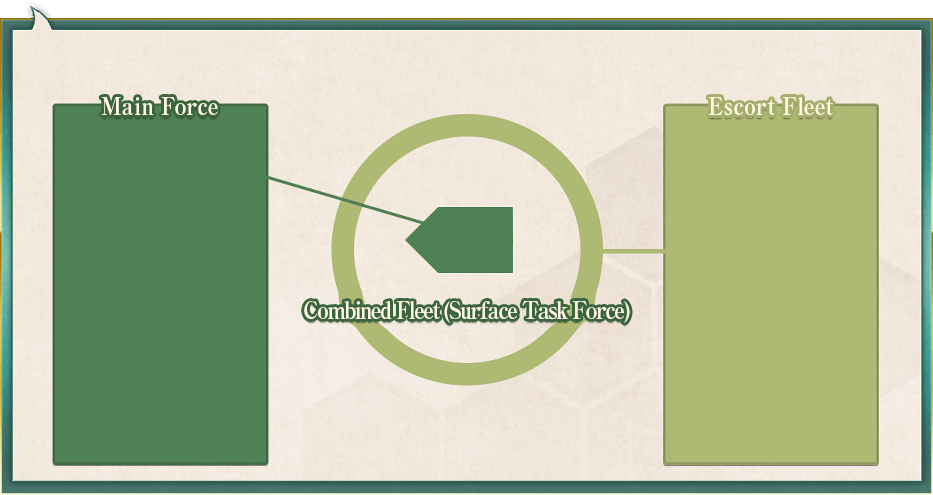
<style>
.page{position:relative;width:933px;height:495px}
.page>*{position:absolute;margin:0}
.t1{font:24px "RyuminPro-ExBold";color:#fff8e7;scale:0.9 1}
.t2{font:24px "RyuminPro-ExBold";letter-spacing:-0.08em;color:#fff8e7;scale:0.9 1}
</style>
<div class="page">
<p class="t1" style="left:101px;top:97px;width:117px;height:18px">Main Force</p>
<p class="t1" style="left:708px;top:97px;width:125px;height:19px">Escort Fleet</p>
<p class="t2" style="left:304px;top:301px;width:326px;height:22px">Combined Fleet (Surface Task Force)</p>
</div>
